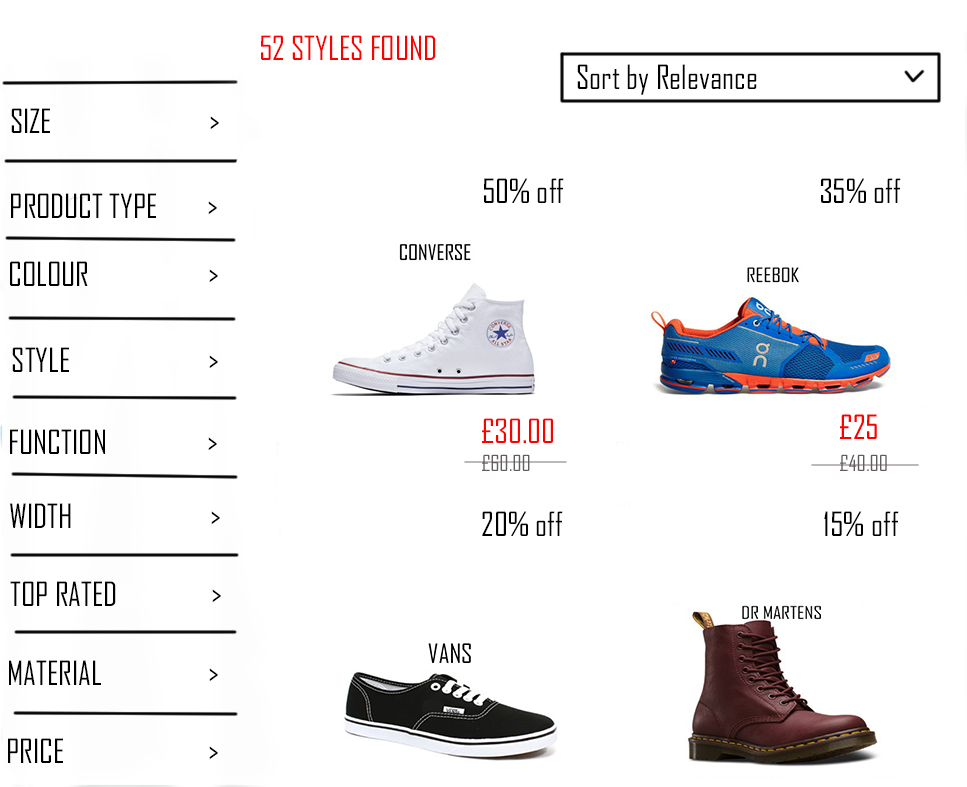
<style>
.page{position:relative;width:967px;height:787px;background:#ffffff}
.page>*{position:absolute;margin:0}
.t1{font:32px "AgencyFB-Reg";color:#ff0000}
.t2{font:32px "AgencyFB-Reg";color:#000000}
.t3{font:21.3px "AgencyFB-Reg";color:#645d5d}
</style>
<div class="page">
<p class="t1" style="left:261px;top:35px;width:175px;height:25px">52 STYLES FOUND</p>
<p class="t2" style="left:577px;top:64px;width:180px;height:31px">Sort by Relevance</p>
<p class="t2" style="left:11px;top:108px;width:208px;height:25px">SIZE                         &gt;</p>
<p class="t2" style="left:484px;top:178px;width:80px;height:25px">50% off</p>
<p class="t2" style="left:821px;top:178px;width:80px;height:25px">35% off</p>
<p class="t2" style="left:11px;top:193px;width:206px;height:25px">PRODUCT TYPE        &gt;</p>
<p class="t2" style="left:10px;top:261px;width:208px;height:25px">COLOUR                   &gt;</p>
<p class="t2" style="left:12px;top:347px;width:206px;height:25px">STYLE                      &gt;</p>
<p class="t1" style="left:482px;top:418px;width:71px;height:25px">£30.00</p>
<p class="t2" style="left:10px;top:429px;width:207px;height:25px">FUNCTION                &gt;</p>
<p class="t3" style="left:482px;top:454px;width:48px;height:17px">£60.00</p>
<p class="t3" style="left:840px;top:454px;width:47px;height:17px">£40.00</p>
<p class="t2" style="left:10px;top:503px;width:210px;height:25px">WIDTH                      &gt;</p>
<p class="t2" style="left:482px;top:511px;width:81px;height:25px">20% off</p>
<p class="t2" style="left:824px;top:511px;width:75px;height:25px">15% off</p>
<p class="t2" style="left:10px;top:581px;width:211px;height:25px">TOP RATED               &gt;</p>
<p class="t2" style="left:9px;top:660px;width:209px;height:25px">MATERIAL                 &gt;</p>
<p class="t2" style="left:8px;top:738px;width:210px;height:25px">PRICE                       &gt;</p>
</div>
